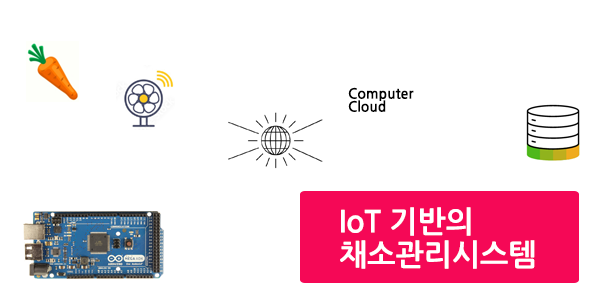
<style>
.page{position:relative;width:600px;height:300px;background:#ffffff}
.page>*{position:absolute;margin:0}
.t1{font:14px/13px "NanumGothicBold";color:#000000}
.t2{font:30px/33px "NanumGothicBold";color:#ffffff}
</style>
<div class="page">
<p class="t1" style="left:348px;top:87px;width:66px;height:25px">Computer<br>Cloud</p>
<p class="t2" style="left:340px;top:207px;width:195px;height:62px">IoT 기반의<br>채소관리시스템</p>
</div>
